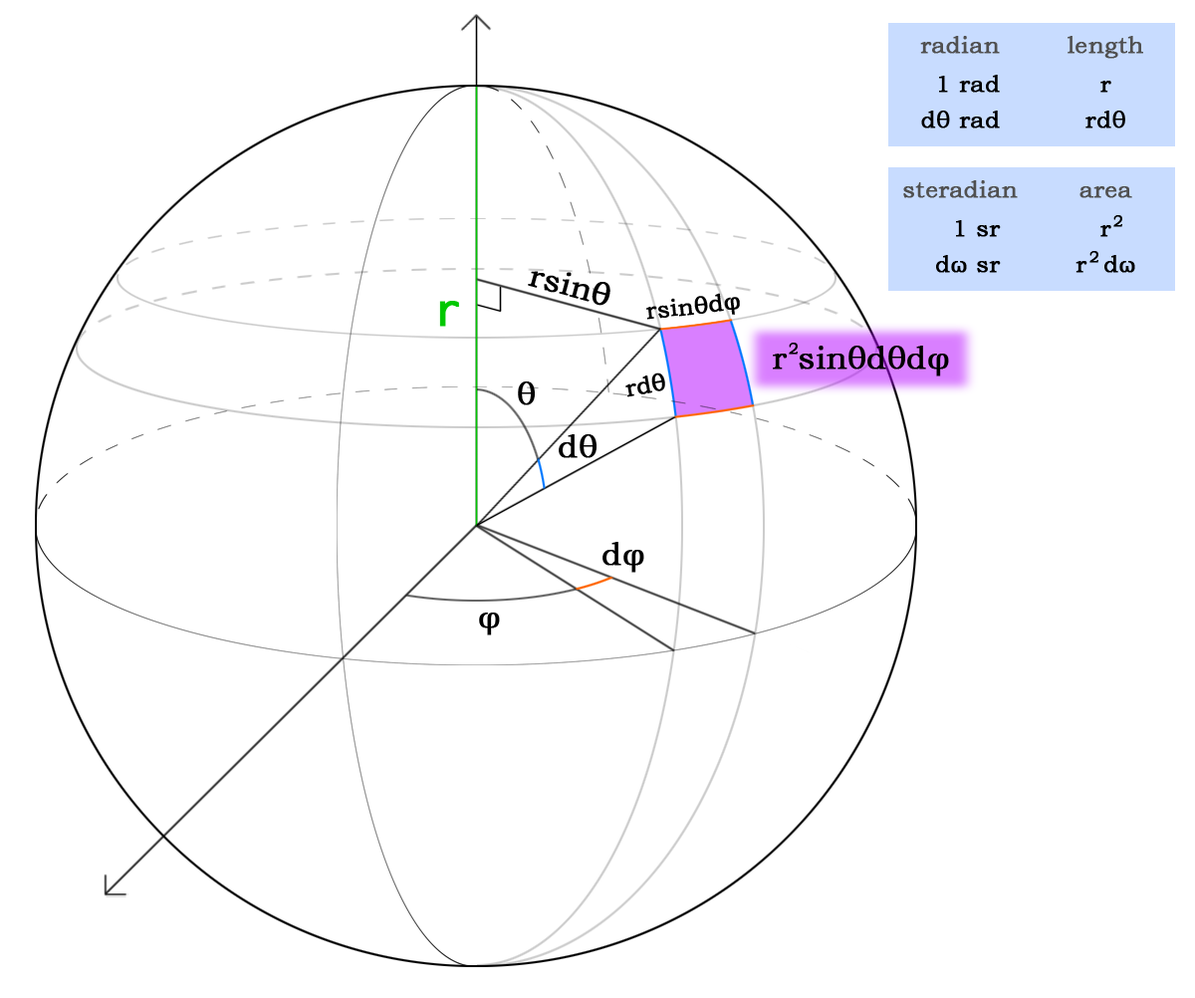
<style>
.page{position:relative;width:1195px;height:998px;background:#ffffff}
.page>*{position:absolute;margin:0}
.t1{font:23.9px "BookmanOldStyle";color:#505050;font-weight:bold}
.t2{font:23.9px "BookmanOldStyle";color:#000000;font-weight:bold}
.t3{font:15.9px "BookmanOldStyle";color:#000000;font-weight:bold}
.t4{font:31.9px "BookmanOldStyle";color:#000000;font-weight:bold}
.t5{font:47.8px "D2Coding";color:#00c800;font-weight:bold}
</style>
<div class="page">
<p class="t1" style="left:920px;top:36px;width:80px;height:18px">radian</p>
<p class="t1" style="left:1068px;top:36px;width:75px;height:23px">length</p>
<p class="t2" style="left:939px;top:75px;width:61px;height:18px">1 rad</p>
<p class="t2" style="left:1100px;top:81px;width:11px;height:12px">r</p>
<p class="t2" style="left:921px;top:111px;width:79px;height:17px">dθ rad</p>
<p class="t2" style="left:1085px;top:111px;width:40px;height:17px">rdθ</p>
<p class="t1" style="left:903px;top:180px;width:115px;height:18px">steradian</p>
<p class="t1" style="left:1079px;top:186px;width:53px;height:12px">area</p>
<p class="t2" style="left:956px;top:220px;width:45px;height:17px">1 sr</p>
<p class="t3" style="left:1113px;top:215px;width:9px;height:12px">2</p>
<p class="t2" style="left:1100px;top:225px;width:11px;height:12px">r</p>
<p class="t2" style="left:936px;top:255px;width:65px;height:18px">dω sr</p>
<p class="t2" style="left:1076px;top:255px;width:59px;height:18px">r  dω</p>
<p class="t3" style="left:1089px;top:251px;width:9px;height:12px">2</p>
<p class="t4" style="left:528px;top:271px;width:82px;height:35px;rotate:15deg">rsinθ</p>
<p class="t2" style="left:646px;top:293px;width:94px;height:27px;rotate:-6deg">rsinθdφ</p>
<p class="t5" style="left:439px;top:301px;width:20px;height:26px">r</p>
<p class="t4" style="left:773px;top:346px;width:176px;height:30px">r sinθdθdφ</p>
<p class="t3" style="left:789px;top:343px;width:9px;height:12px">2</p>
<p class="t2" style="left:625px;top:372px;width:40px;height:25px;rotate:-10deg">rdθ</p>
<p class="t4" style="left:518px;top:381px;width:17px;height:24px">θ</p>
<p class="t4" style="left:559px;top:434px;width:38px;height:24px">dθ</p>
<p class="t4" style="left:602px;top:542px;width:42px;height:31px">dφ</p>
<p class="t4" style="left:479px;top:612px;width:21px;height:23px">φ</p>
</div>
